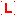
<style>
.page{position:relative;width:16px;height:16px;background:#ffffff}
.page>*{position:absolute;margin:0}
.t1{font:13.9px "Bahnschrift-Bold";letter-spacing:0.05em;color:#ff0000;font-weight:bold}
</style>
<div class="page">
<p class="t1" style="left:5px;top:3px;width:7px;height:10px">L</p>
</div>
